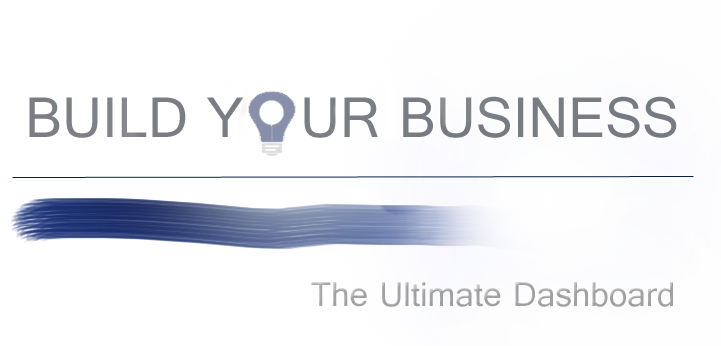
<style>
.page{position:relative;width:721px;height:346px;background:#ffffff}
.page>*{position:absolute;margin:0}
.t1{font:60px "Gautami";color:#7a7e84}
.t2{font:36px "Gautami";color:#a1a1a2}
</style>
<div class="page">
<p class="t1" style="left:29px;top:96px;width:648px;height:42px">BUILD Y   UR BUSINESS</p>
<p class="t2" style="left:311px;top:282px;width:362px;height:25px">The Ultimate Dashboard</p>
</div>
